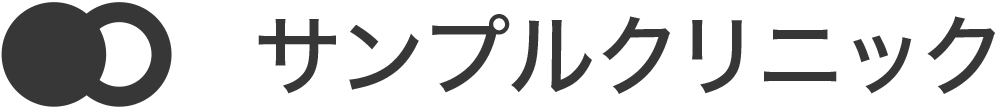
<style>
.page{position:relative;width:1000px;height:110px;background:#ffffff}
.page>*{position:absolute;margin:0}
.t1{font:88.5px "HiraginoSans-W5";letter-spacing:0.05em;color:#373737}
</style>
<div class="page">
<p class="t1" style="left:258px;top:14px;width:738px;height:80px">サンプルクリニック</p>
</div>
